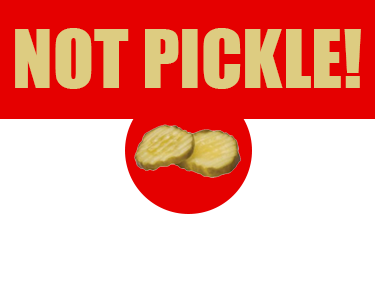
<style>
.page{position:relative;width:375px;height:300px;background:#ffffff}
.page>*{position:absolute;margin:0}
.t1{font:75px "Impact";color:#ddcc81}
</style>
<div class="page">
<p class="t1" style="left:15px;top:28px;width:346px;height:61px">NOT PICKLE!</p>
</div>
